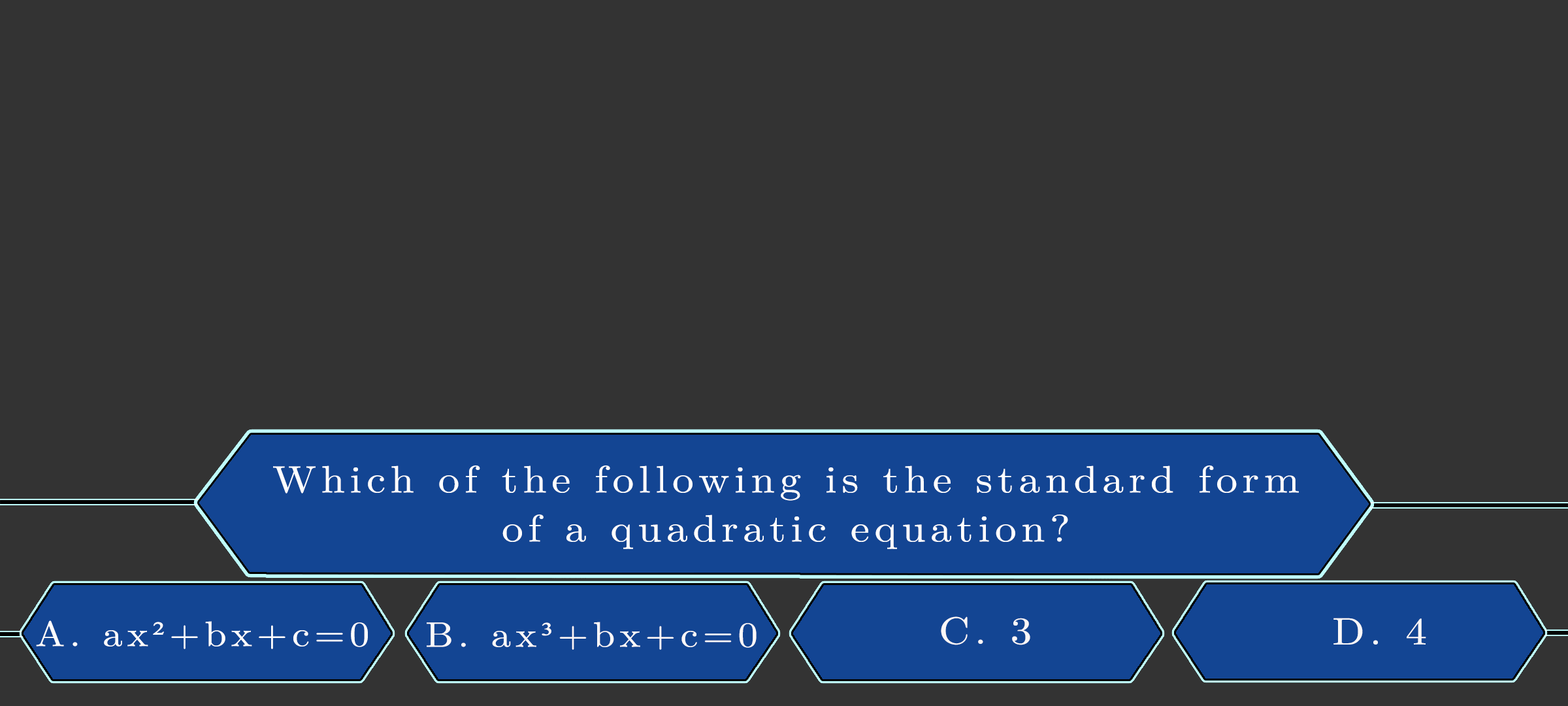
<style>
.page{position:relative;width:1568px;height:706px;background:#333333}
.page>*{position:absolute;margin:0}
.t1{font:38.1px/49px "LatinModernMath-Regular";letter-spacing:0.115em;color:#ffffff;scale:1.12 1}
.t2{font:38.1px "LatinModernMath-Regular";letter-spacing:0.115em;color:#fcf7f7;text-transform:uppercase;scale:1.12 1}
.t3{font:38.1px "LatinModernMath-Regular";letter-spacing:0.115em;color:#fbf8f8;text-transform:uppercase;scale:1.12 1}
.t4{font:35.4px "LatinModernMath-Regular";letter-spacing:0.115em;color:#fffefe;scale:1.12 1}
.t5{font:35.4px "LatinModernMath-Regular";letter-spacing:0.115em;color:#fffefe;text-transform:uppercase;scale:1.12 1}
.t6{font:35.4px "TimesNewRomanPSMT";letter-spacing:0.115em;color:#fffefe;scale:1.12 1}
.t7{font:35.4px "LatinModernMath-Regular";letter-spacing:0.115em;color:#fdf9f9;scale:1.12 1}
.t8{font:35.4px "LatinModernMath-Regular";letter-spacing:0.115em;color:#fdf9f9;text-transform:uppercase;scale:1.12 1}
.t9{font:35.4px "TimesNewRomanPSMT";letter-spacing:0.115em;color:#fdf9f9;scale:1.12 1}
</style>
<div class="page">
<p class="t1" style="left:273px;top:465px;width:1026px;height:84px;text-align:center">Which of the following is the standard form<br>of a quadratic equation?</p>
<p class="t2" style="left:941px;top:616px;width:89px;height:29px">c. 3</p>
<p class="t3" style="left:1333px;top:617px;width:93px;height:27px">d. 4</p>
<p class="t4" style="left:36px;top:620px;width:332px;height:29px"><span class="t5">a. </span>ax<span class="t6">²</span>+bx+c=0</p>
<p class="t7" style="left:427px;top:621px;width:330px;height:28px"><span class="t8">b. </span>ax<span class="t9">³</span>+bx+c=0</p>
</div>
